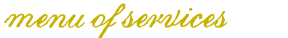
<style>
.page{position:relative;width:288px;height:38px;background:#ffffff}
.page>*{position:absolute;margin:0}
.t1{font:34px "ArchiveRoundhandScript";color:#c7b200}
</style>
<div class="page">
<p class="t1" style="left:4px;top:3px;width:224px;height:36px">menu of services</p>
</div>
